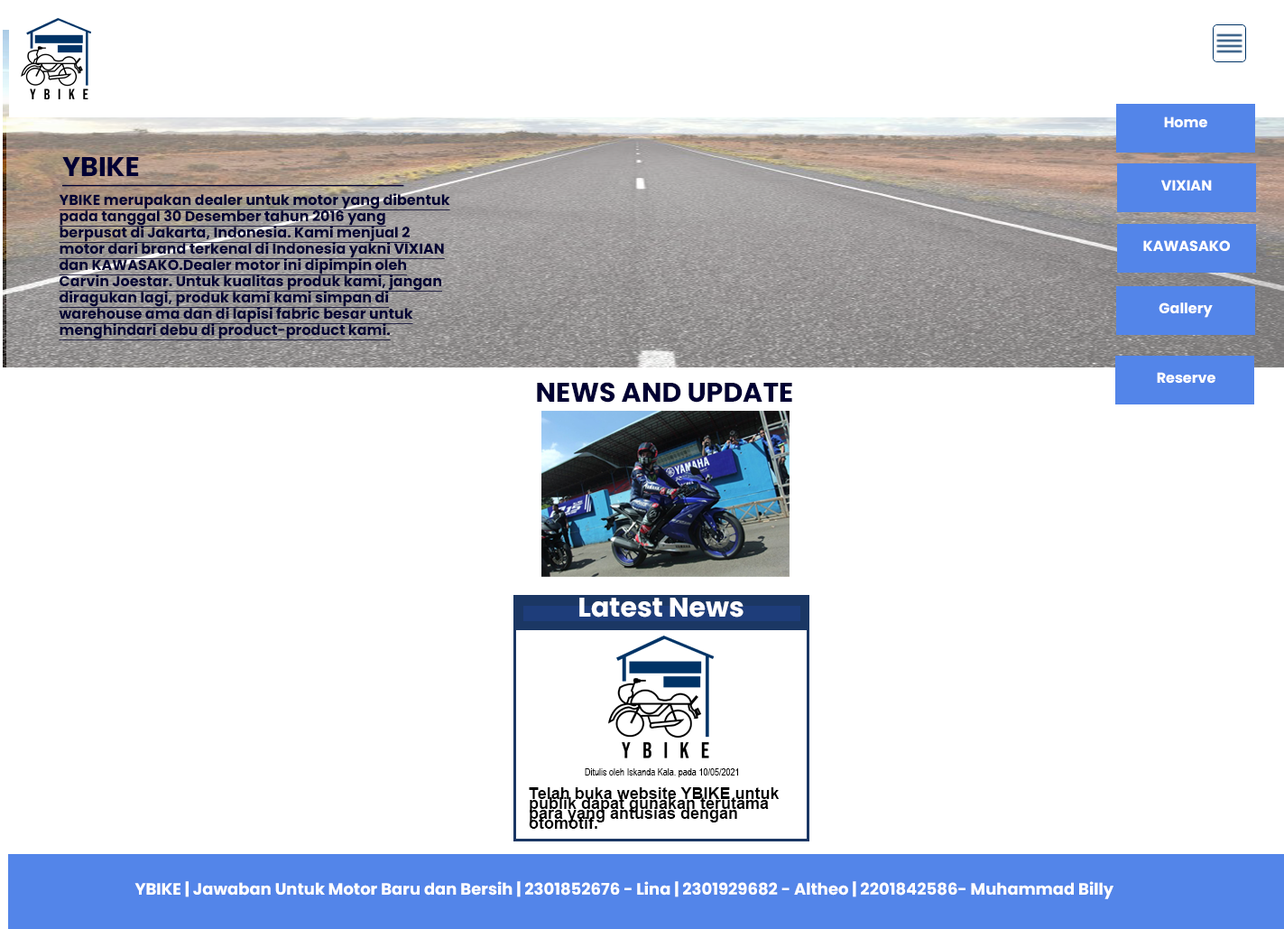
<style>
.page{position:relative;width:1284px;height:929px;background:#ffffff}
.page>*{position:absolute;margin:0}
.t1{font:14.4px/16.2px "Poppins-Bold";color:#ffffff}
.t2{font:9.9px/0px "Poppins-Bold";color:#ffffff}
.t3{font:9.9px/370px "Poppins-Bold";color:#ffffff}
.t4{font:27.1px "Poppins-Bold";color:#000033;text-decoration:underline}
.t5{font:14.4px "Poppins-Bold";color:#ffffff}
.t6{font:14.4px/16.2px "Poppins-Bold";color:#000033;text-decoration:underline}
.t7{font:27.1px "Poppins-Bold";color:#000033}
.t8{font:27.1px "Poppins-Bold";color:#ffffff}
.t9{font:9.9px "ArialNarrow";color:#000000}
.t10{font:16.2px/9.9px "Arial-BoldMT";color:#000000}
.t11{font:16.2px "Poppins-Bold";color:#ffffff}
</style>
<div class="page">
<p class="t1" style="left:1164px;top:116px;width:43px;height:12px;text-align:center"><span class="t2"><br><br><br><br></span>Home<br><span class="t3">ho</span></p>
<p class="t4" style="left:62px;top:157px;width:342px;height:30px">YBIKE</p>
<p class="t5" style="left:1161px;top:180px;width:51px;height:10px">VIXIAN</p>
<p class="t6" style="left:59px;top:193px;width:391px;height:147px">YBIKE merupakan dealer untuk motor yang dibentuk pada tanggal 30 Desember tahun 2016 yang berpusat di Jakarta, Indonesia. Kami menjual 2 motor dari brand terkenal di Indonesia yakni VIXIAN dan KAWASAKO.Dealer motor ini dipimpin oleh Carvin Joestar. Untuk kualitas produk kami, jangan diragukan lagi, produk kami kami simpan di warehouse ama dan di lapisi fabric besar untuk menghindari debu di product-product kami.</p>
<p class="t5" style="left:1143px;top:240px;width:87px;height:11px">KAWASAKO</p>
<p class="t5" style="left:1159px;top:302px;width:54px;height:16px">Gallery</p>
<p class="t5" style="left:1157px;top:372px;width:59px;height:12px">Reserve</p>
<p class="t7" style="left:537px;top:382px;width:255px;height:20px">NEWS AND UPDATE</p>
<p class="t8" style="left:579px;top:597px;width:165px;height:20px">Latest News</p>
<p class="t9" style="left:585px;top:768px;width:153px;height:9px">Ditulis oleh Iskanda Kala. pada 10/05/2021</p>
<p class="t10" style="left:529px;top:787px;width:251px;height:41px">Telah buka website YBIKE untuk publik dapat gunakan terutama para yang antusias dengan otomotif.</p>
<p class="t11" style="left:134px;top:881px;width:980px;height:18px">YBIKE | Jawaban Untuk Motor Baru dan Bersih | 2301852676 - Lina | 2301929682 - Altheo | 2201842586- Muhammad Billy</p>
</div>
